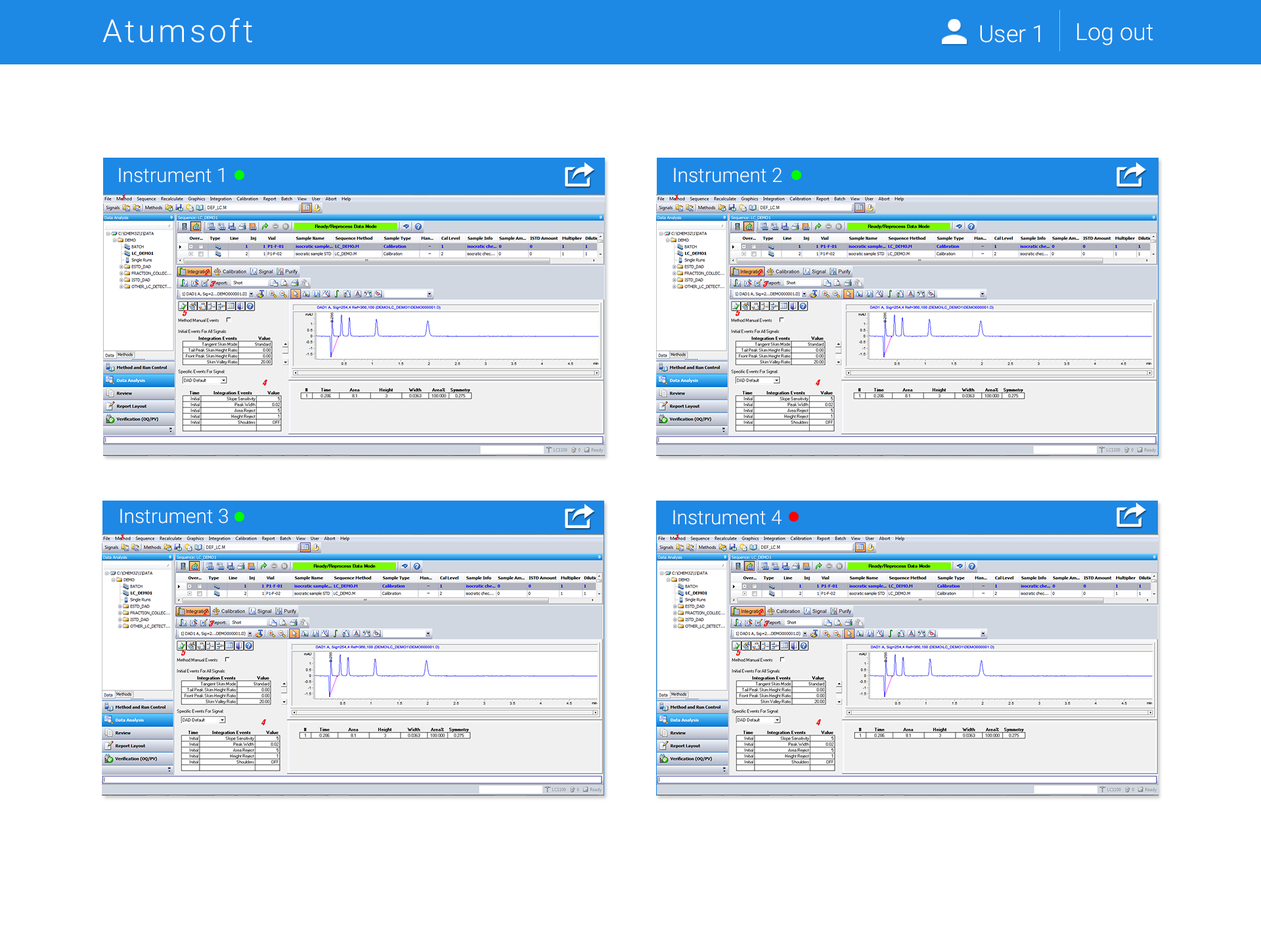
<style>
.page{position:relative;width:1261px;height:946px;background:#ffffff}
.page>*{position:absolute;margin:0}
.t1{font:31.5px "Roboto-Light";letter-spacing:0.1em;color:#ffffff}
.t2{font:23.6px "Roboto-Light";color:#ffffff}
.t3{font:19.7px "Roboto-Light";color:#ffffff}
</style>
<div class="page">
<p class="t1" style="left:102px;top:18px;width:150px;height:25px">Atumsoft</p>
<p class="t2" style="left:980px;top:25px;width:60px;height:18px">User 1</p>
<p class="t2" style="left:1077px;top:23px;width:76px;height:22px">Log out</p>
<p class="t3" style="left:119px;top:167px;width:105px;height:16px">Instrument 1</p>
<p class="t3" style="left:674px;top:167px;width:108px;height:16px">Instrument 2</p>
<p class="t3" style="left:120px;top:508px;width:108px;height:15px">Instrument 3</p>
<p class="t3" style="left:673px;top:510px;width:109px;height:15px">Instrument 4</p>
</div>
